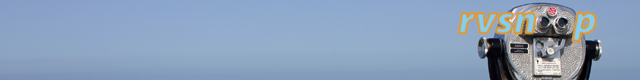
<style>
.page{position:relative;width:640px;height:80px}
.page>*{position:absolute;margin:0}
.t1{font:40px "MyriadPro-BlackIt"}
</style>
<div class="page">
<p class="t1" style="left:458px;top:12px;width:137px;height:29px">rvsn     p</p>
</div>
